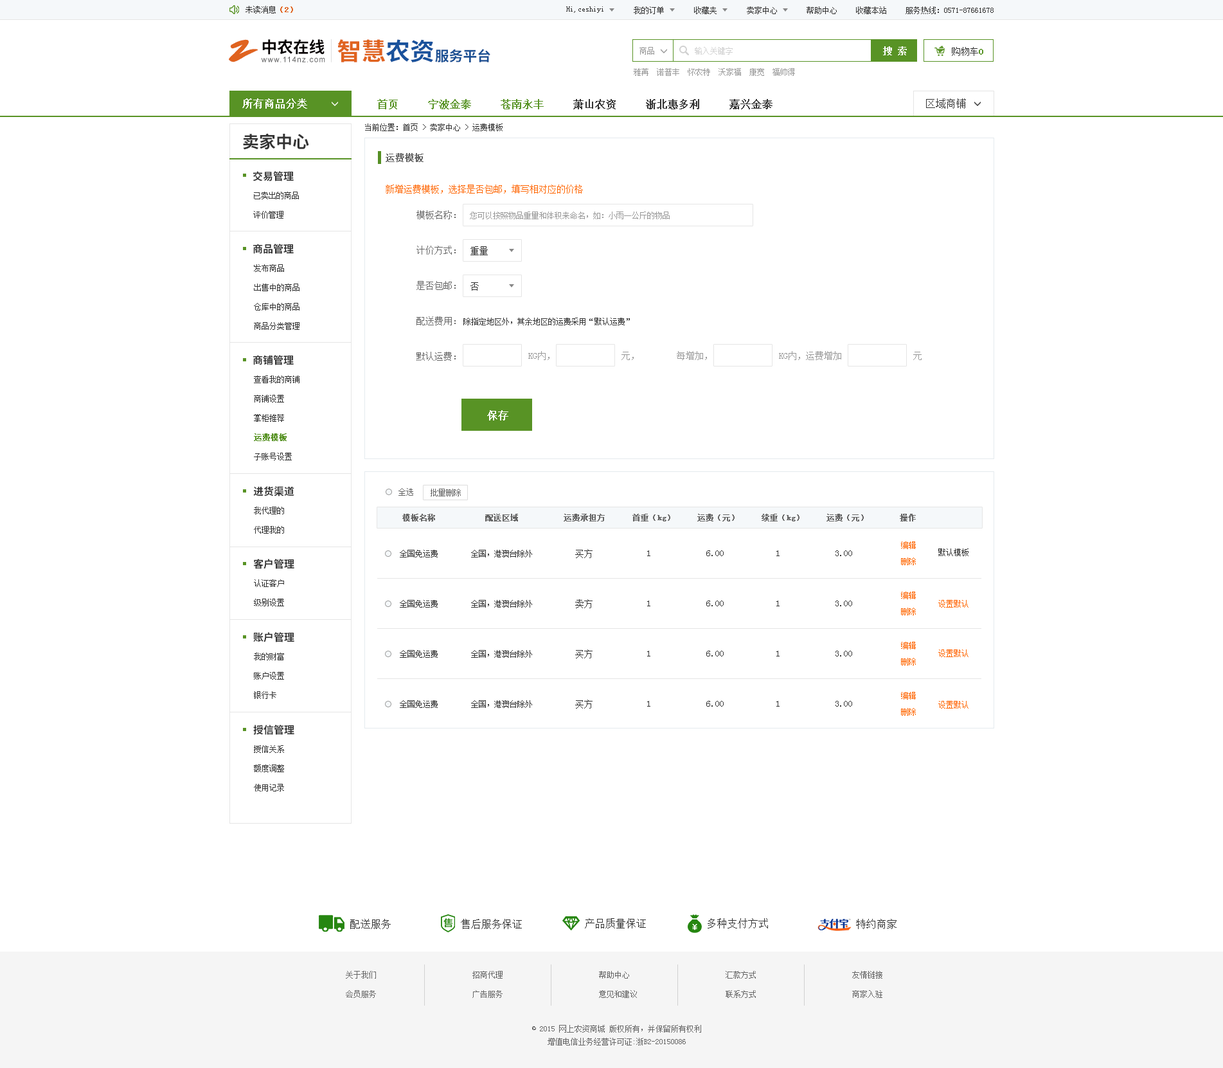
<style>
.page{position:relative;width:1223px;height:1068px;background:#ffffff}
.page>*{position:absolute;margin:0}
.t1{font:7.7px "SimSun";color:#333333}
.t2{font:7.7px "SimSun";color:#e0631f;font-weight:bold}
.t3{font:32.6px "SmudgerLetPlain";color:#e0631f}
.t4{font:15.9px "SourceHanSansCN-Bold";color:#060001}
.t5{font:24.3px "SourceHanSansCN-Bold";color:#e0631f}
.t6{font:24.3px "SourceHanSansCN-Bold";color:#1a529c}
.t7{font:14px "SourceHanSansCN-Bold";color:#194f93}
.t8{font:7.7px "SimSun";color:#999999}
.t9{font:7.7px "SimSun";color:#d1d1d1}
.t10{font:9px "SimSun";color:#ffffff;font-weight:bold}
.t11{font:9px "SimSun";color:#333333}
.t12{font:9px "SimSun";color:#589325;font-weight:bold}
.t13{font:7.6px "ArialMT";letter-spacing:0.1em;color:#585859}
.t14{font:10.3px "SimSun";color:#ffffff;font-weight:bold}
.t15{font:10.3px "SimSun";color:#333333;font-weight:bold}
.t16{font:10.3px "SimSun";color:#589325;font-weight:bold}
.t17{font:10.3px "SimSun";color:#333333}
.t18{font:16.7px "SourceHanSansCN-Bold";color:#333333}
.t19{font:9px "SimSun";color:#666666;font-weight:bold}
.t20{font:10.3px "SourceHanSansCN-Bold";color:#333333}
.t21{font:9px "SimSun";color:#ff6600}
.t22{font:7.7px/19.3px "SimSun";color:#333333}
.t23{font:9px "SimSun";color:#666666}
.t24{font:9px "SimSun";color:#999999}
.t25{font:7.7px/19.3px "SimSun";color:#589325;font-weight:bold}
.t26{font:7.7px "SimSun";color:#666666}
.t27{font:7.7px "SimSun";color:#666666;font-weight:bold}
.t28{font:7.7px/16.1px "SimSun";color:#ff6600}
.t29{font:7.7px "SimSun";color:#ff6600}
.t30{font:7.7px/19.3px "SimSun";color:#666666}
.t31{font:7.7px/12.9px "SimSun";color:#666666}
</style>
<div class="page">
<p class="t1" style="left:246px;top:6px;width:47px;height:8px">未读消息<span class="t2">（2）</span></p>
<p class="t1" style="left:566px;top:6px;width:38px;height:7px">Hi,ceshiyi</p>
<p class="t1" style="left:634px;top:6px;width:30px;height:8px">我的订单</p>
<p class="t1" style="left:694px;top:6px;width:23px;height:8px">收藏夹</p>
<p class="t1" style="left:747px;top:6px;width:30px;height:8px">卖家中心</p>
<p class="t1" style="left:807px;top:6px;width:30px;height:8px">帮助中心</p>
<p class="t1" style="left:856px;top:6px;width:31px;height:8px">收藏本站</p>
<p class="t1" style="left:906px;top:6px;width:88px;height:8px">服务热线：0571-87661678</p>
<p class="t3" style="left:229px;top:39px;width:29px;height:23px">Z</p>
<p class="t4" style="left:262px;top:39px;width:63px;height:16px">中农在线</p>
<p class="t5" style="left:338px;top:39px;width:96px;height:23px">智慧<span class="t6">农资</span></p>
<p class="t7" style="left:435px;top:49px;width:56px;height:13px">服务平台</p>
<p class="t8" style="left:640px;top:47px;width:14px;height:8px">商品</p>
<p class="t9" style="left:695px;top:47px;width:38px;height:8px">输入关键字</p>
<p class="t10" style="left:883px;top:46px;width:24px;height:9px">搜 索</p>
<p class="t11" style="left:952px;top:47px;width:32px;height:9px">购物车<span class="t12">0</span></p>
<p class="t13" style="left:261px;top:57px;width:64px;height:5px">www.114nz.com</p>
<p class="t8" style="left:634px;top:68px;width:161px;height:8px">雅苒  诺普丰  怀农特  沃家福  康宽  福帅得</p>
<p class="t14" style="left:242px;top:98px;width:65px;height:11px">所有商品分类</p>
<p class="t15" style="left:377px;top:99px;width:396px;height:10px"><span class="t16">首页     宁波金泰     苍南永丰    </span> 萧山农资     浙北惠多利     嘉兴金泰</p>
<p class="t17" style="left:926px;top:98px;width:40px;height:11px">区域商铺</p>
<p class="t1" style="left:365px;top:123px;width:138px;height:8px">当前位置：首页 &gt; 卖家中心 &gt; 运费模板</p>
<p class="t18" style="left:243px;top:133px;width:66px;height:17px">卖家中心</p>
<p class="t19" style="left:386px;top:153px;width:38px;height:9px">运费模板</p>
<p class="t20" style="left:253px;top:171px;width:41px;height:10px">交易管理</p>
<p class="t21" style="left:386px;top:184px;width:197px;height:10px">新增运费模板，选择是否包邮，填写相对应的价格</p>
<p class="t22" style="left:253px;top:192px;width:46px;height:27px">已卖出的商品<br>评价管理</p>
<p class="t23" style="left:417px;top:210px;width:39px;height:9px">模板名称：</p>
<p class="t8" style="left:470px;top:212px;width:200px;height:7px">您可以按照物品重量和体积来命名，如：小雨一公斤的物品</p>
<p class="t20" style="left:253px;top:244px;width:41px;height:10px">商品管理</p>
<p class="t23" style="left:417px;top:246px;width:39px;height:9px">计价方式：</p>
<p class="t11" style="left:471px;top:246px;width:17px;height:9px">重量</p>
<p class="t22" style="left:254px;top:264px;width:46px;height:66px">发布商品<br>出售中的商品<br>仓库中的商品<br>商品分类管理</p>
<p class="t23" style="left:417px;top:281px;width:39px;height:9px">是否包邮：</p>
<p class="t11" style="left:471px;top:282px;width:8px;height:9px">否</p>
<p class="t23" style="left:417px;top:316px;width:39px;height:9px">配送费用：</p>
<p class="t1" style="left:464px;top:318px;width:166px;height:7px">除指定地区外，其余地区的运费采用“默认运费”</p>
<p class="t23" style="left:417px;top:352px;width:39px;height:9px">默认运费：</p>
<p class="t24" style="left:528px;top:351px;width:22px;height:9px">KG内，</p>
<p class="t24" style="left:622px;top:352px;width:12px;height:8px">元，</p>
<p class="t24" style="left:677px;top:351px;width:30px;height:9px">每增加，</p>
<p class="t24" style="left:779px;top:351px;width:63px;height:9px">KG内，运费增加</p>
<p class="t24" style="left:914px;top:352px;width:8px;height:8px">元</p>
<p class="t20" style="left:253px;top:355px;width:41px;height:10px">商铺管理</p>
<p class="t22" style="left:254px;top:375px;width:46px;height:85px">查看我的商铺<br>商铺设置<br>掌柜推荐<br><span class="t25">运费模板<br></span>子账号设置</p>
<p class="t14" style="left:487px;top:410px;width:22px;height:10px">保存</p>
<p class="t20" style="left:253px;top:486px;width:41px;height:10px">进货渠道</p>
<p class="t26" style="left:399px;top:488px;width:14px;height:8px">全选</p>
<p class="t26" style="left:431px;top:489px;width:30px;height:7px">批量删除</p>
<p class="t22" style="left:254px;top:507px;width:30px;height:27px">我代理的<br>代理我的</p>
<p class="t27" style="left:402px;top:514px;width:514px;height:7px">模板名称           配送区域          运费承担方      首重（kg）     运费（元）     续重（kg）     运费（元）       操作</p>
<p class="t28" style="left:901px;top:541px;width:15px;height:24px;text-align:center">编辑<br>删除</p>
<p class="t1" style="left:400px;top:550px;width:38px;height:7px">全国免运费</p>
<p class="t1" style="left:471px;top:550px;width:61px;height:7px">全国，港澳台除外</p>
<p class="t11" style="left:575px;top:549px;width:18px;height:9px">买方</p>
<p class="t11" style="left:647px;top:550px;width:4px;height:6px">1</p>
<p class="t11" style="left:706px;top:550px;width:18px;height:6px">6.00</p>
<p class="t11" style="left:777px;top:550px;width:3px;height:6px">1</p>
<p class="t11" style="left:836px;top:550px;width:16px;height:6px">3.00</p>
<p class="t1" style="left:939px;top:548px;width:30px;height:8px">默认模板</p>
<p class="t20" style="left:253px;top:559px;width:41px;height:10px">客户管理</p>
<p class="t22" style="left:254px;top:579px;width:30px;height:27px">认证客户<br>级别设置</p>
<p class="t28" style="left:901px;top:591px;width:15px;height:24px;text-align:center">编辑<br>删除</p>
<p class="t1" style="left:400px;top:600px;width:38px;height:8px">全国免运费</p>
<p class="t1" style="left:471px;top:600px;width:61px;height:8px">全国，港澳台除外</p>
<p class="t11" style="left:575px;top:599px;width:18px;height:9px">卖方</p>
<p class="t11" style="left:647px;top:600px;width:4px;height:6px">1</p>
<p class="t11" style="left:706px;top:600px;width:18px;height:6px">6.00</p>
<p class="t11" style="left:777px;top:600px;width:3px;height:6px">1</p>
<p class="t11" style="left:836px;top:600px;width:16px;height:6px">3.00</p>
<p class="t29" style="left:939px;top:600px;width:30px;height:8px">设置默认</p>
<p class="t20" style="left:253px;top:632px;width:41px;height:10px">账户管理</p>
<p class="t28" style="left:901px;top:642px;width:15px;height:23px;text-align:center">编辑<br>删除</p>
<p class="t22" style="left:254px;top:652px;width:30px;height:47px">我的财富<br>账户设置<br>银行卡</p>
<p class="t1" style="left:400px;top:650px;width:38px;height:8px">全国免运费</p>
<p class="t1" style="left:471px;top:650px;width:61px;height:8px">全国，港澳台除外</p>
<p class="t11" style="left:575px;top:649px;width:18px;height:9px">买方</p>
<p class="t11" style="left:647px;top:651px;width:4px;height:5px">1</p>
<p class="t11" style="left:706px;top:651px;width:18px;height:5px">6.00</p>
<p class="t11" style="left:777px;top:651px;width:3px;height:5px">1</p>
<p class="t11" style="left:836px;top:651px;width:16px;height:5px">3.00</p>
<p class="t29" style="left:939px;top:649px;width:30px;height:8px">设置默认</p>
<p class="t1" style="left:400px;top:700px;width:38px;height:8px">全国免运费</p>
<p class="t1" style="left:471px;top:700px;width:61px;height:8px">全国，港澳台除外</p>
<p class="t11" style="left:575px;top:699px;width:18px;height:9px">买方</p>
<p class="t11" style="left:647px;top:701px;width:4px;height:5px">1</p>
<p class="t11" style="left:706px;top:701px;width:18px;height:5px">6.00</p>
<p class="t11" style="left:777px;top:701px;width:3px;height:5px">1</p>
<p class="t11" style="left:836px;top:701px;width:16px;height:5px">3.00</p>
<p class="t28" style="left:901px;top:692px;width:15px;height:24px;text-align:center">编辑<br>删除</p>
<p class="t29" style="left:939px;top:701px;width:30px;height:7px">设置默认</p>
<p class="t20" style="left:253px;top:724px;width:41px;height:11px">授信管理</p>
<p class="t22" style="left:254px;top:745px;width:30px;height:46px">授信关系<br>额度调整<br>使用记录</p>
<p class="t17" style="left:350px;top:919px;width:41px;height:10px">配送服务</p>
<p class="t17" style="left:461px;top:919px;width:61px;height:10px">售后服务保证</p>
<p class="t17" style="left:585px;top:918px;width:61px;height:10px">产品质量保证</p>
<p class="t17" style="left:708px;top:918px;width:60px;height:10px">多种支付方式</p>
<p class="t17" style="left:856px;top:919px;width:41px;height:10px">特约商家</p>
<p class="t30" style="left:346px;top:971px;width:30px;height:27px">关于我们<br>会员服务</p>
<p class="t30" style="left:473px;top:971px;width:30px;height:27px">招商代理<br>广告服务</p>
<p class="t30" style="left:599px;top:971px;width:38px;height:27px">帮助中心<br>意见和建议</p>
<p class="t30" style="left:726px;top:971px;width:30px;height:27px">汇款方式<br>联系方式</p>
<p class="t30" style="left:852px;top:971px;width:31px;height:27px">友情链接<br>商家入驻</p>
<p class="t31" style="left:532px;top:1025px;width:169px;height:20px;text-align:center">© 2015 网上农资商城 版权所有，并保留所有权利<br>增值电信业务经营许可证:浙B2-20150086</p>
</div>
